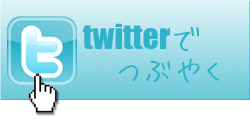
<style>
.page{position:relative;width:250px;height:120px}
.page>*{position:absolute;margin:0}
.t1{font:32px/30px "Impact";color:#2fb3ca}
.t2{font:32px/30px "HuiFontP";color:#2fb3ca}
</style>
<div class="page">
<p class="t1" style="left:83px;top:23px;width:136px;height:60px">twitter<span class="t2">で<br>　つぶやく</span></p>
</div>
